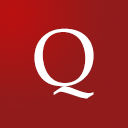
<style>
.page{position:relative;width:128px;height:128px}
.page>*{position:absolute;margin:0}
.t1{font:80px "Palatino-Roman";color:#ffffff}
</style>
<div class="page">
<p class="t1" style="left:34px;top:28px;width:60px;height:71px">Q</p>
</div>
